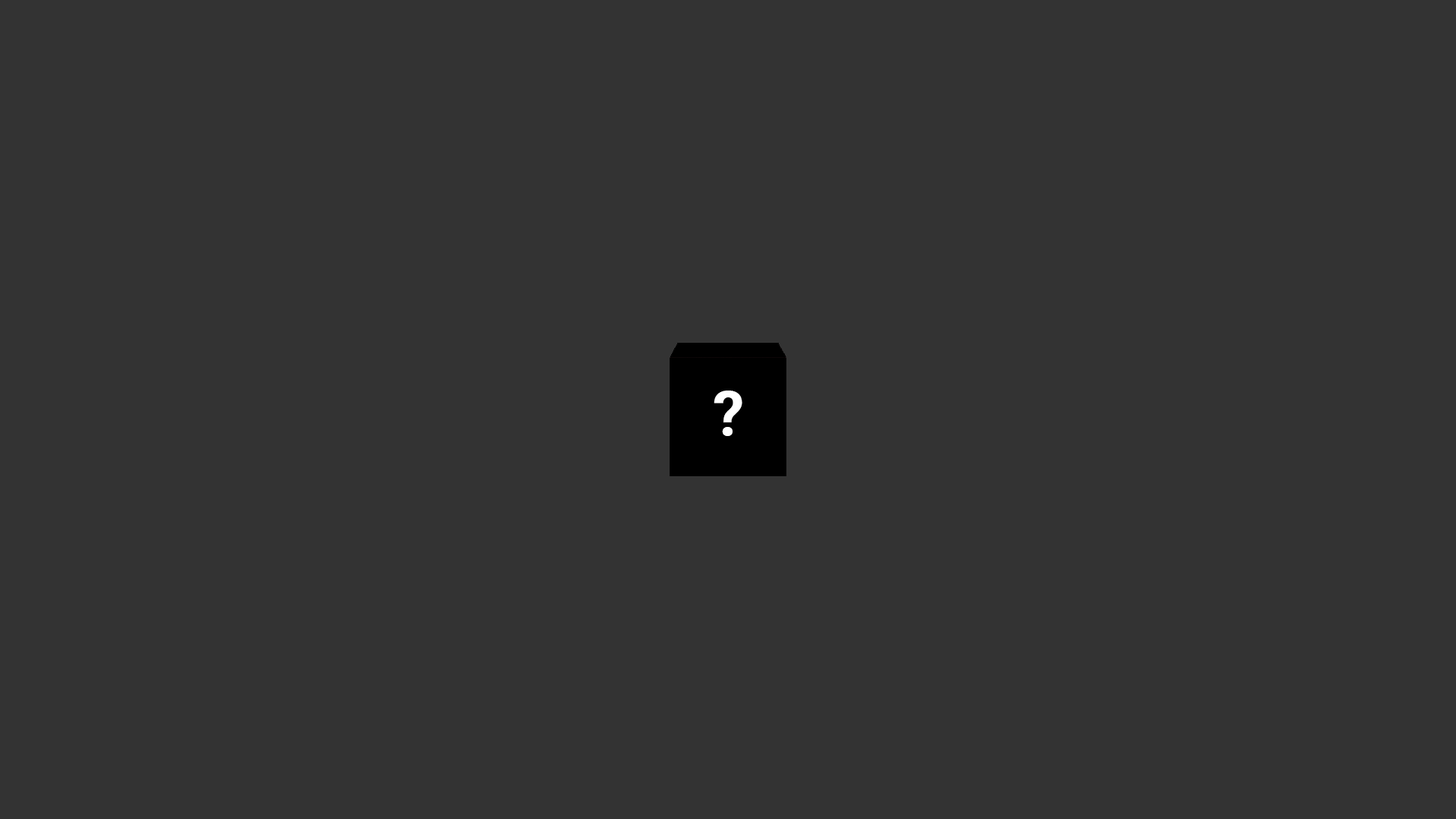
<style>
.page{position:relative;width:1456px;height:819px;background:#333333}
.page>*{position:absolute;margin:0}
.t1{font:63.2px "Roboto-Bold";color:#ffffff}
</style>
<div class="page">
<p class="t1" style="left:714px;top:391px;width:28px;height:45px">?</p>
</div>
